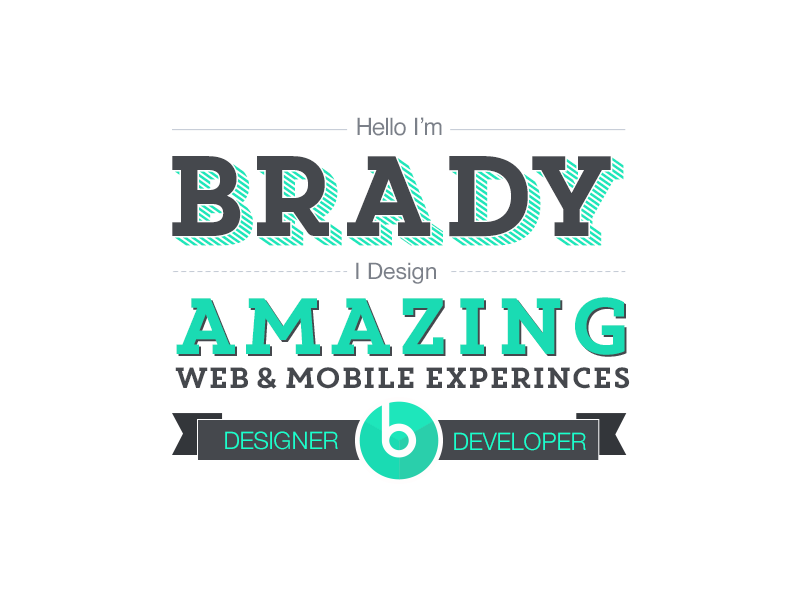
<style>
.page{position:relative;width:800px;height:600px;background:#ffffff}
.page>*{position:absolute;margin:0}
.t1{font:24px "Helvetica";letter-spacing:-0.02em;color:#7b8089}
.t2{font:113.8px "CoreMagic";letter-spacing:-0.08em;color:#45484d;text-transform:uppercase}
.t3{font:113.8px "CoreMagic3DLine1";letter-spacing:-0.08em;color:#1ee6bb;text-transform:uppercase}
.t4{font:22.7px "HelveticaNeue";color:#7b8089}
.t5{font:79.7px "CoreMagic";letter-spacing:-0.12em;color:#2acfab;text-transform:uppercase}
.t6{font:29.3px "CoreMagic";letter-spacing:-0.18em;color:#45484d;text-transform:uppercase}
.t7{font:24px "HelveticaNeue-Light";color:#19ffcd;text-transform:uppercase}
.t8{font:24px "HelveticaNeue-Light";color:#18ffcd;text-transform:uppercase}
</style>
<div class="page">
<p class="t1" style="left:357px;top:117px;width:85px;height:19px">Hello I’m</p>
<p class="t2" style="left:172px;top:156px;width:439px;height:81px">BRADY</p>
<p class="t3" style="left:175px;top:157px;width:449px;height:89px">BRADY</p>
<p class="t4" style="left:356px;top:262px;width:80px;height:22px">I Design</p>
<p class="t5" style="left:176px;top:297px;width:449px;height:58px">Amazing</p>
<p class="t6" style="left:175px;top:367px;width:455px;height:22px">Web &amp; mobile experinces</p>
<p class="t7" style="left:225px;top:431px;width:113px;height:19px">DESIGNER</p>
<p class="t8" style="left:454px;top:432px;width:132px;height:19px">DEVELOPER</p>
</div>
